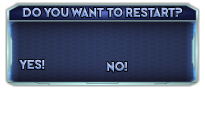
<style>
.page{position:relative;width:205px;height:130px;background:#ffffff}
.page>*{position:absolute;margin:0}
.t1{font:13px "PerfectlyTogether"}
</style>
<div class="page">
<p class="t1" style="left:22px;top:7px;width:161px;height:12px">Do you want to restart?</p>
<p class="t1" style="left:19px;top:59px;width:26px;height:11px">Yes!</p>
<p class="t1" style="left:106px;top:61px;width:21px;height:12px">No!</p>
</div>
